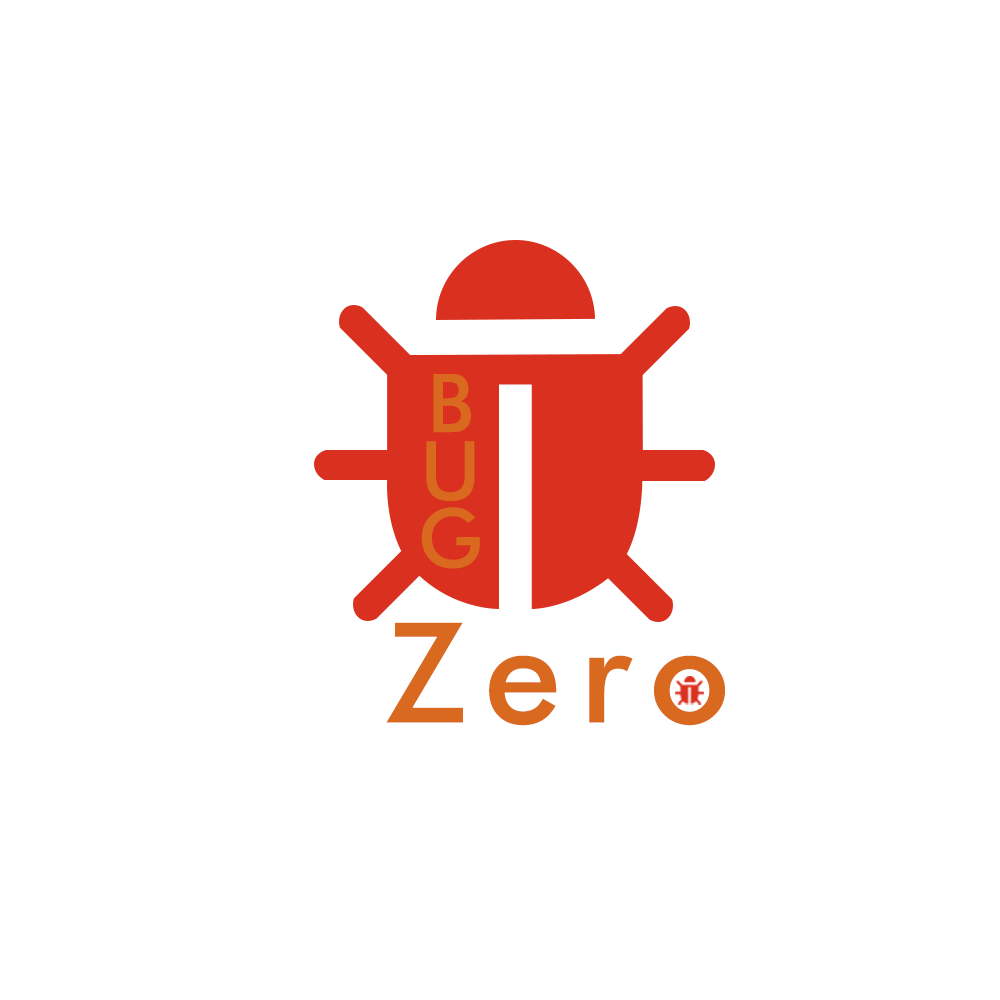
<style>
.page{position:relative;width:1000px;height:1000px;background:#ffffff}
.page>*{position:absolute;margin:0}
.t1{font:139.2px "FuturaBT-Medium";letter-spacing:-0.17em;color:#d9691f}
.t2{font:238.7px "FuturaBT-Medium";letter-spacing:0.13em;color:#d9691f}
</style>
<div class="page">
<p class="t1" style="left:421px;top:374px;width:59px;height:195px">BUG</p>
<p class="t2" style="left:386px;top:622px;width:339px;height:104px">Zero</p>
</div>
